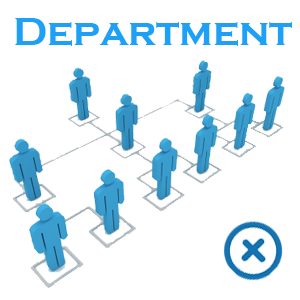
<style>
.page{position:relative;width:300px;height:300px;background:#ffffff}
.page>*{position:absolute;margin:0}
.t1{font:40.8px "CopperplateGothic-Bold";color:#1ea0f6}
</style>
<div class="page">
<p class="t1" style="left:15px;top:18px;width:277px;height:28px">Department</p>
</div>
